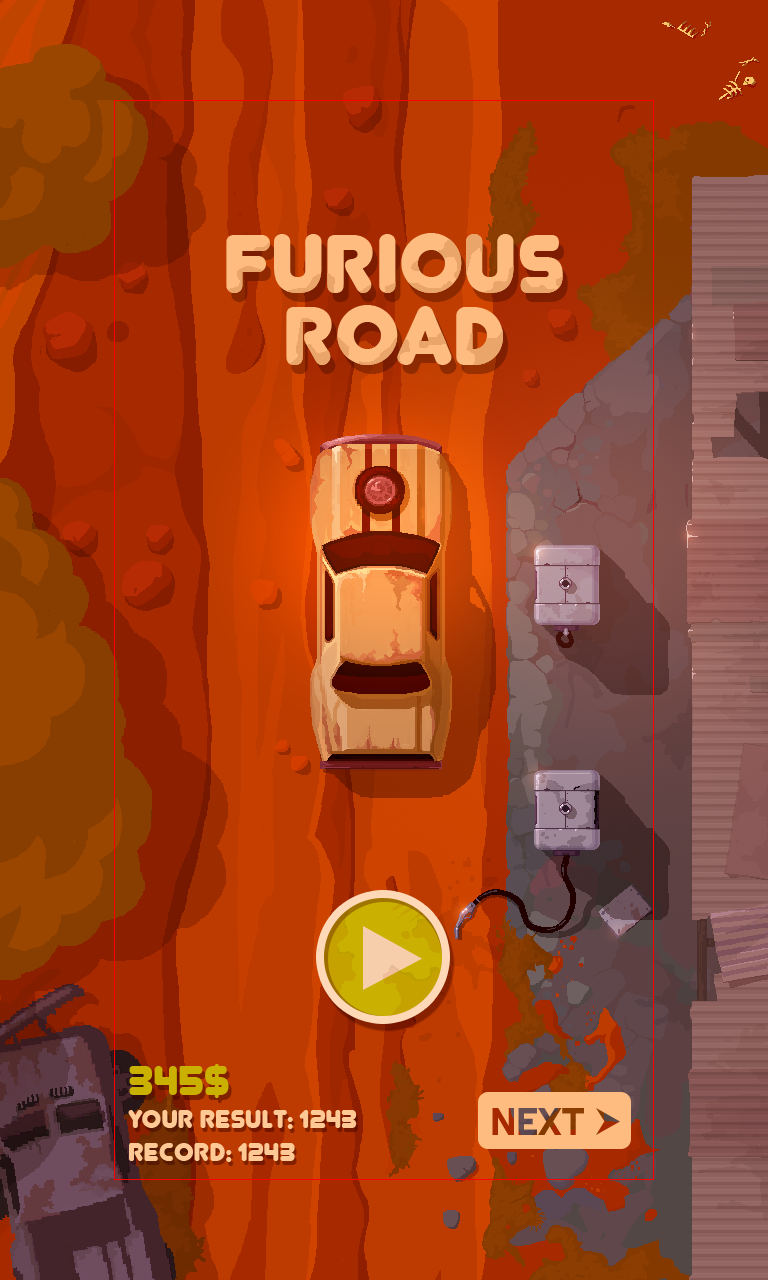
<style>
.page{position:relative;width:768px;height:1280px}
.page>*{position:absolute;margin:0}
.t1{font:97.9px/72px "Junegull";color:#ffbc80}
.t2{font:48px "Junegull";color:#cab000}
.t3{font:30px "Junegull";color:#ffc995}
</style>
<div class="page">
<p class="t1" style="left:226px;top:233px;width:337px;height:132px;text-align:center">FURIOUS<br>ROAD</p>
<p class="t2" style="left:129px;top:1064px;width:100px;height:34px">345$</p>
<p class="t3" style="left:128px;top:1110px;width:229px;height:19px">Your result: 1243</p>
<p class="t3" style="left:129px;top:1143px;width:166px;height:19px">RECORD: 1243</p>
</div>
